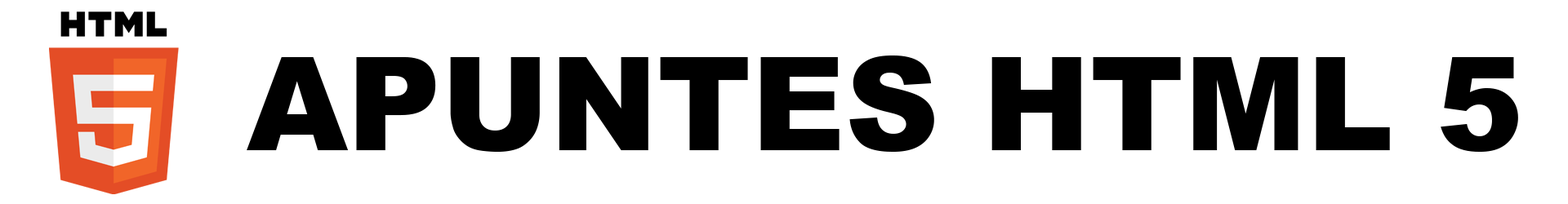
<style>
.page{position:relative;width:1568px;height:204px;background:#ffffff}
.page>*{position:absolute;margin:0}
.t1{font:129.8px "Arial-Black";color:#000000}
</style>
<div class="page">
<p class="t1" style="left:247px;top:56px;width:1271px;height:96px">APUNTES HTML 5</p>
</div>
